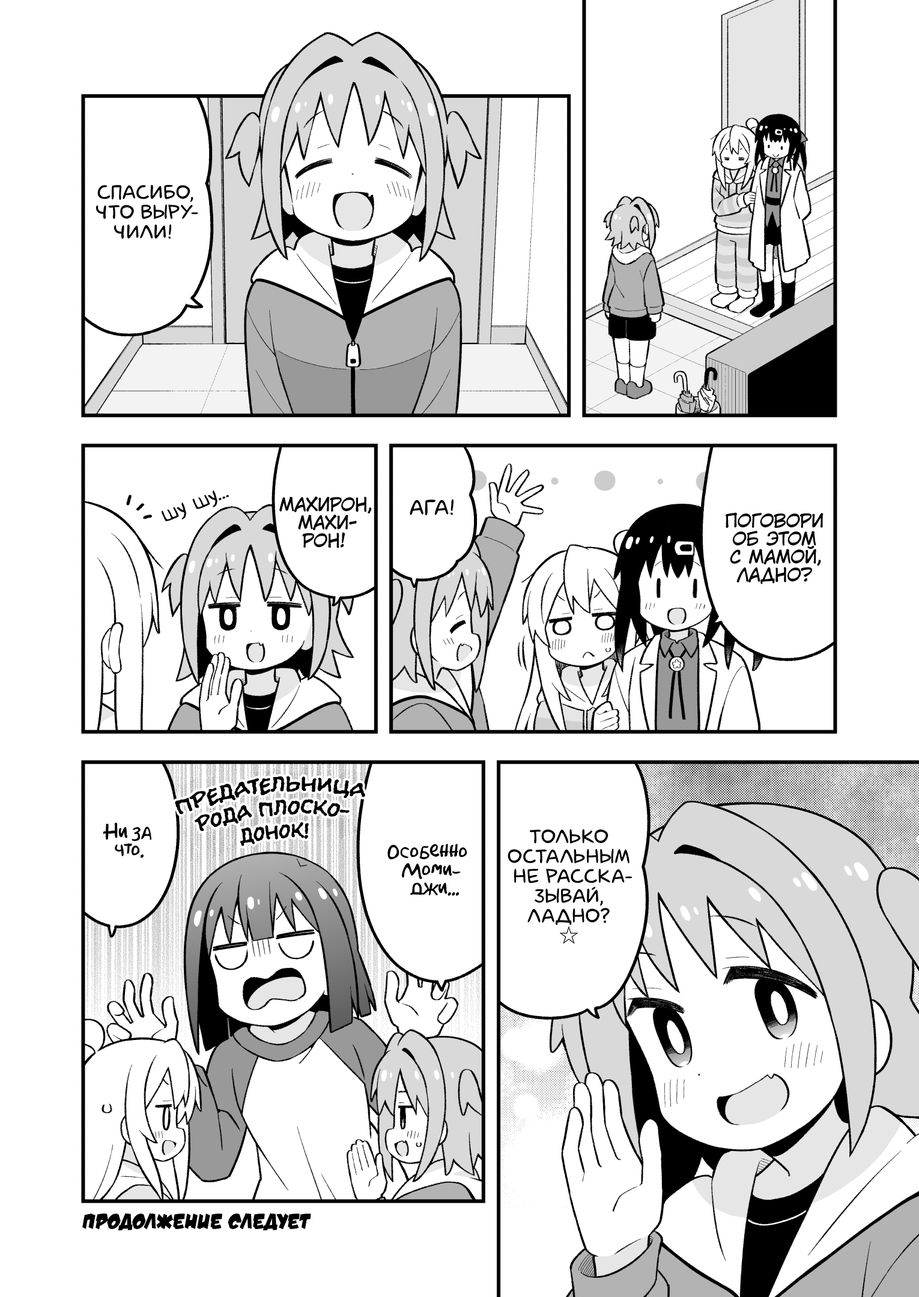
<style>
.page{position:relative;width:919px;height:1297px;background:#ffffff}
.page>*{position:absolute;margin:0}
.t1{font:19.8px "laCartoonerie";color:#000000;text-transform:uppercase}
.t2{font:21.6px "v_Augie";color:#000000}
.t3{font:18px "KuraiVoice2";color:#000000;text-transform:uppercase}
.t4{font:21.6px "laCartoonerie";color:#000000;text-transform:uppercase}
.t5{font:23.4px "el_CCEvilSchemes";color:#000000;text-transform:uppercase;scale:0.9 1}
.t6{font:18px "AkbarPlain";color:#000000}
.t7{font:19.8px "KozGoPr6N-Regular";color:#000000;text-transform:uppercase}
.t8{font:21.6px "v_DamnNoisyKids";color:#000000;text-transform:uppercase}
</style>
<div class="page">
<p class="t1" style="left:96px;top:185px;width:102px;height:54px;text-align:center">Спасибо,<br>что выру-<br>чили!</p>
<p class="t2" style="left:162px;top:490px;width:67px;height:31px;rotate:-21deg">шу шу...</p>
<p class="t3" style="left:279px;top:497px;width:93px;height:51px;text-align:center">Махирон,<br>Махи-<br>рон!</p>
<p class="t4" style="left:410px;top:499px;width:44px;height:17px">Ага!</p>
<p class="t3" style="left:726px;top:512px;width:98px;height:72px;text-align:center">Поговори<br>об этом<br>с мамой,<br>ладно?</p>
<p class="t5" style="left:175px;top:776px;width:190px;height:70px;text-align:center;rotate:-5deg">Предательница<br>рода плоско-<br>донок!</p>
<p class="t6" style="left:103px;top:823px;width:49px;height:35px;text-align:center">Ни за<br>что.</p>
<p class="t1" style="left:508px;top:830px;width:125px;height:114px;text-align:center">Только<br>остальным<br>не расска-<br>зывай,<br>ладно?<br><span class="t7">☆</span></p>
<p class="t6" style="left:387px;top:844px;width:80px;height:52px;text-align:center">Особенно<br>Моми-<br>джи...</p>
<p class="t8" style="left:82px;top:1213px;width:229px;height:18px">Продолжение следует</p>
</div>
